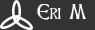
<style>
.page{position:relative;width:95px;height:30px;background:#333333}
.page>*{position:absolute;margin:0}
.t1{font:18px "CelticHand";color:#ffffff}
</style>
<div class="page">
<p class="t1" style="left:37px;top:4px;width:49px;height:16px">Eri M</p>
</div>
